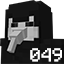
<style>
.page{position:relative;width:64px;height:64px;background:#ffffff}
.page>*{position:absolute;margin:0}
.t1{font:18.5px "Minecraft-Regular";color:#ffffff}
</style>
<div class="page">
<p class="t1" style="left:30px;top:48px;width:32px;height:14px">049</p>
</div>
